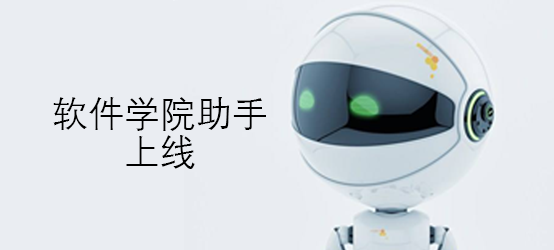
<style>
.page{position:relative;width:554px;height:250px;background:#eaedf2}
.page>*{position:absolute;margin:0}
.t1{font:36px/38px "DengXian-Regular";color:#000000}
</style>
<div class="page">
<p class="t1" style="left:53px;top:97px;width:213px;height:72px">软件学院助手<br>  上线</p>
</div>
